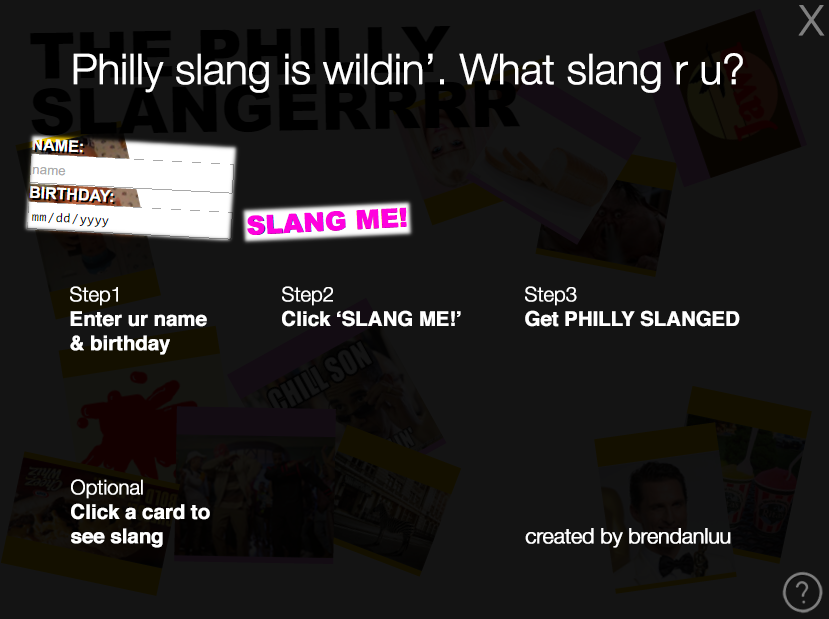
<style>
.page{position:relative;width:829px;height:619px;background:#141414}
.page>*{position:absolute;margin:0}
.t1{font:42px "HelveticaNeue-Light";letter-spacing:-0.025em;color:#7f7f7f;font-weight:bold}
.t2{font:42px "HelveticaNeue-Light";letter-spacing:-0.025em;color:#ffffff;font-weight:bold}
.t3{font:26.2px "Arial-Black";letter-spacing:-0.025em;color:#ff00de;font-weight:bold}
.t4{font:20.3px "Helvetica-Bold";letter-spacing:-0.025em;color:#ffffff;font-weight:bold}
.t5{font:20.3px "HelveticaNeue-Light";letter-spacing:-0.025em;color:#ffffff;font-weight:bold}
.t6{font:21.2px "HelveticaNeue-Light";letter-spacing:-0.025em;color:#ffffff;font-weight:bold}
</style>
<div class="page">
<p class="t1" style="left:798px;top:5px;width:27px;height:31px">X</p>
<p class="t2" style="left:73px;top:53px;width:670px;height:40px">Philly slang is wildin’. What slang r u?</p>
<p class="t3" style="left:247px;top:207px;width:160px;height:28px;rotate:-3deg">SLANG ME!</p>
<p class="t4" style="left:70px;top:286px;width:137px;height:69px"><span class="t5">Step1<br></span>Enter ur name<br>&amp; birthday</p>
<p class="t4" style="left:282px;top:286px;width:179px;height:41px"><span class="t5">Step2<br></span>Click ‘SLANG ME!’</p>
<p class="t4" style="left:525px;top:286px;width:215px;height:41px"><span class="t5">Step3<br></span>Get PHILLY SLANGED</p>
<p class="t4" style="left:71px;top:479px;width:139px;height:69px"><span class="t5">Optional<br></span>Click a card to <br>see slang</p>
<p class="t6" style="left:525px;top:528px;width:206px;height:20px">created by brendanluu</p>
</div>
